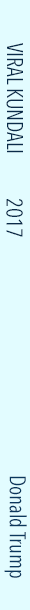
<style>
.page{position:relative;width:30px;height:610px;background:#e2fcff}
.page>*{position:absolute;margin:0}
.t1{font:22.4px "AvenirNextCondensed-Regular";color:#092b49;scale:0.94 1}
.t2{font:22.4px "AvenirNextCondensed-Regular";color:#0a375d;scale:0.94 1}
</style>
<div class="page">
<p class="t1" style="left:6px;top:43px;width:17px;height:110px;rotate:90deg">VIRAL KUNDALI</p>
<p class="t1" style="left:6px;top:199px;width:17px;height:38px;rotate:90deg">2017</p>
<p class="t2" style="left:4px;top:476px;width:23px;height:102px;rotate:90deg">Donald Trump</p>
</div>
